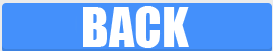
<style>
.page{position:relative;width:273px;height:51px;background:#4490fb}
.page>*{position:absolute;margin:0}
.t1{font:50px "Impact";color:#ffffff}
</style>
<div class="page">
<p class="t1" style="left:83px;top:6px;width:106px;height:42px">BACK</p>
</div>
